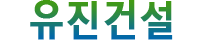
<style>
.page{position:relative;width:200px;height:40px;background:#ffffff}
.page>*{position:absolute;margin:0}
.t1{font:39.6px "MalgunGothicBold";font-weight:bold;scale:0.91 1}
</style>
<div class="page">
<p class="t1" style="left:30px;top:0px;width:143px;height:40px">유진건설</p>
</div>
